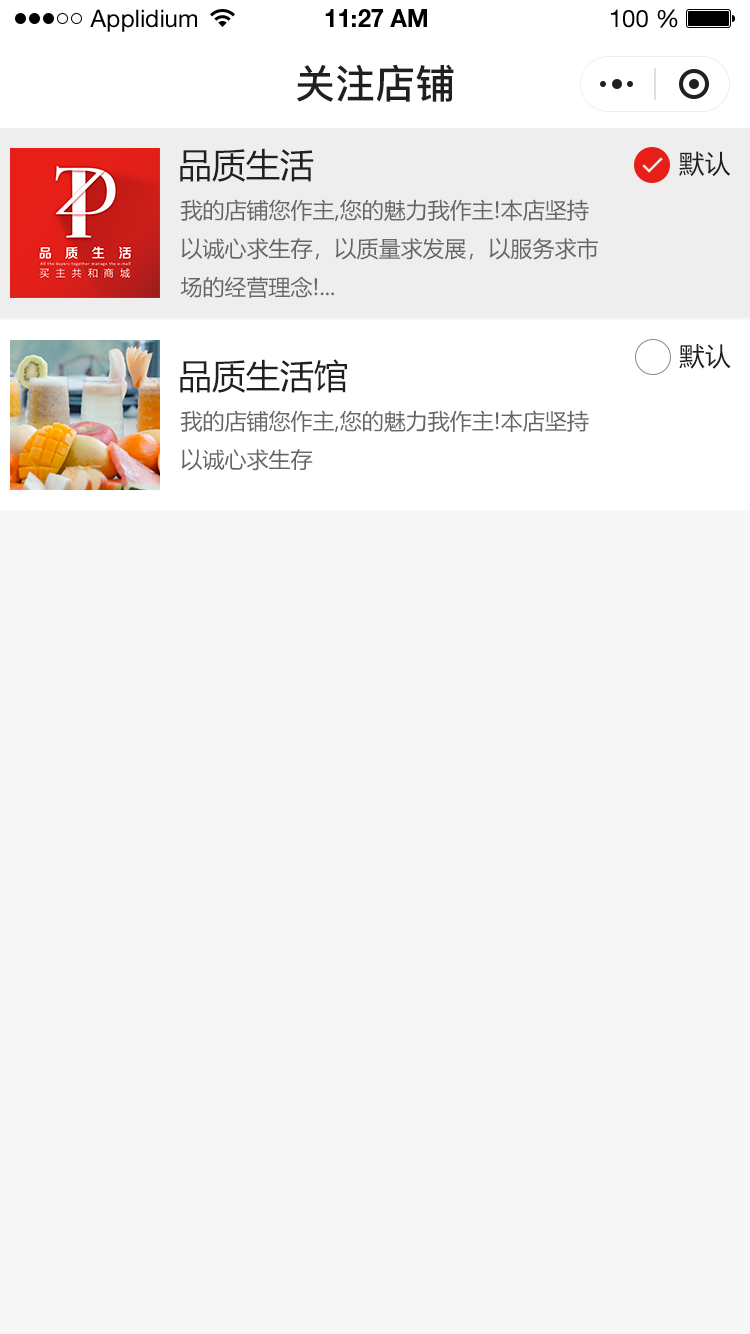
<style>
.page{position:relative;width:750px;height:1334px;background:#f7f7f7}
.page>*{position:absolute;margin:0}
.t1{font:24px "HelveticaNeueLTStd-Roman";color:#000000}
.t2{font:24px "HelveticaNeueLTStd-Bd";color:#000000}
.t3{font:40px "PingFang-SC-Bold";color:#202020;text-transform:uppercase}
.t4{font:34px "MicrosoftYaHei";color:#202020;text-transform:uppercase}
.t5{font:26px "MicrosoftYaHei";color:#202020;text-transform:uppercase}
.t6{font:22px "MicrosoftYaHei";color:#666666;text-transform:uppercase}
</style>
<div class="page">
<p class="t1" style="left:90px;top:9px;width:107px;height:23px">Applidium</p>
<p class="t2" style="left:325px;top:9px;width:102px;height:18px">11:27 AM</p>
<p class="t1" style="left:611px;top:9px;width:67px;height:19px">100 %</p>
<p class="t3" style="left:297px;top:64px;width:157px;height:38px">关注店铺</p>
<p class="t4" style="left:180px;top:148px;width:134px;height:34px">品质生活</p>
<p class="t5" style="left:679px;top:151px;width:52px;height:26px">默认</p>
<p class="t6" style="left:180px;top:199px;width:418px;height:99px">我的店铺您作主,您的魅力我作主!本店坚持<br>以诚心求生存，以质量求发展，以服务求市<br>场的经营理念!...</p>
<p class="t5" style="left:679px;top:344px;width:52px;height:25px">默认</p>
<p class="t4" style="left:180px;top:359px;width:167px;height:34px">品质生活馆</p>
<p class="t6" style="left:180px;top:410px;width:409px;height:61px">我的店铺您作主,您的魅力我作主!本店坚持<br>以诚心求生存</p>
</div>
